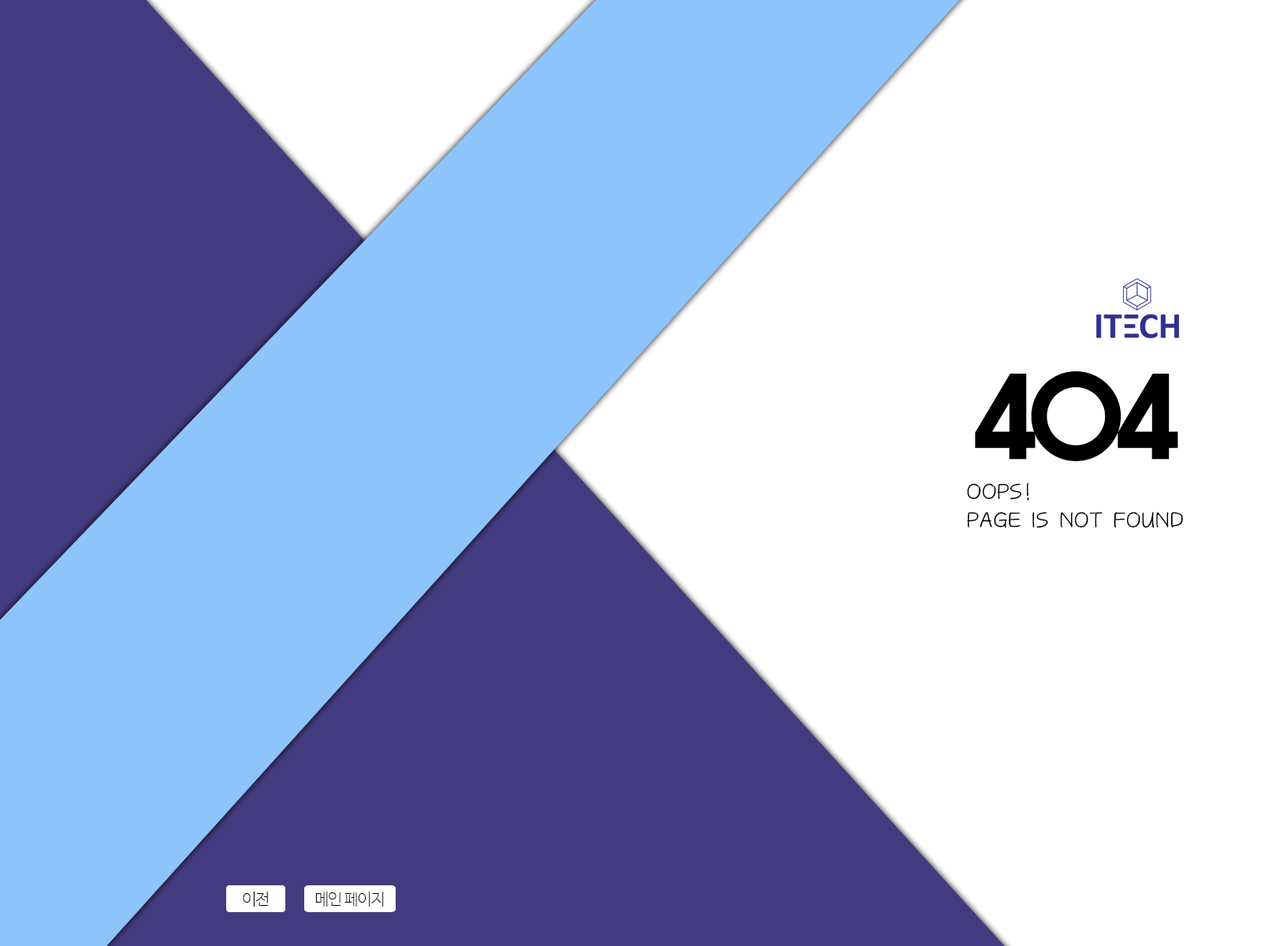
<style>
.page{position:relative;width:1261px;height:946px;background:#ffffff}
.page>*{position:absolute;margin:0}
.t1{font:118.2px "HaanYHeadB";letter-spacing:-0.045em;color:#000000}
.t2{font:23.6px "MDEasop";letter-spacing:-0.045em;color:#000000}
.t3{font:15.8px "NanumBarunGothicUltraLight";letter-spacing:-0.045em;color:#000000}
</style>
<div class="page">
<p class="t1" style="left:975px;top:370px;width:203px;height:91px">404</p>
<p class="t2" style="left:967px;top:482px;width:216px;height:46px">OOPS!<br>PAGE IS NOT FOUND</p>
<p class="t3" style="left:243px;top:891px;width:26px;height:15px">이전</p>
<p class="t3" style="left:315px;top:891px;width:69px;height:15px">메인 페이지</p>
</div>
